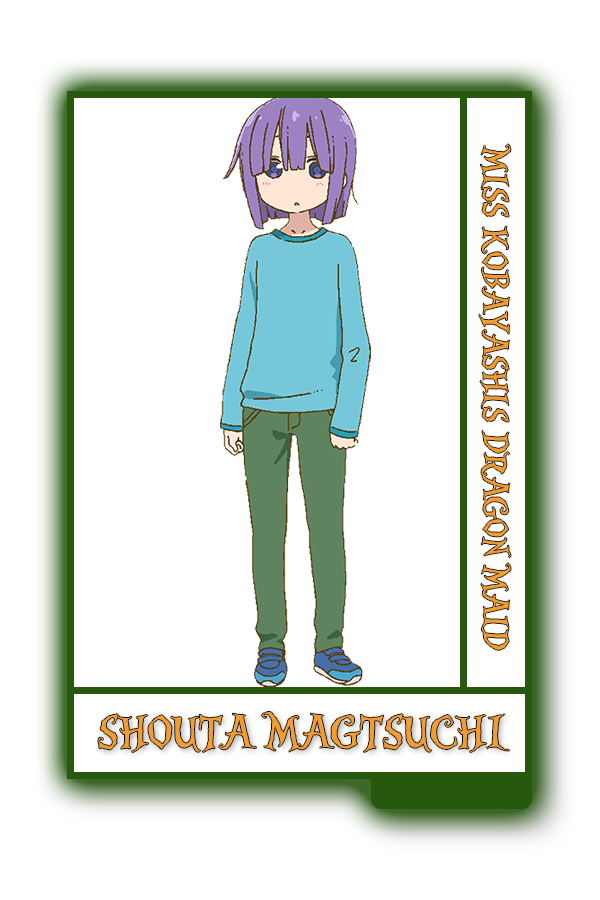
<style>
.page{position:relative;width:600px;height:900px;background:#ffffff}
.page>*{position:absolute;margin:0}
.t1{font:37.3px "AliceinWonderland";color:#f29d33}
.t2{font:49.9px "AliceinWonderland";color:#f29d33}
</style>
<div class="page">
<p class="t1" style="left:479px;top:144px;width:32px;height:506px;rotate:90deg">MISS KOBAYASHIS DRAGON MAID</p>
<p class="t2" style="left:98px;top:712px;width:412px;height:40px">SHOUTA MAGTSUCHI</p>
</div>
